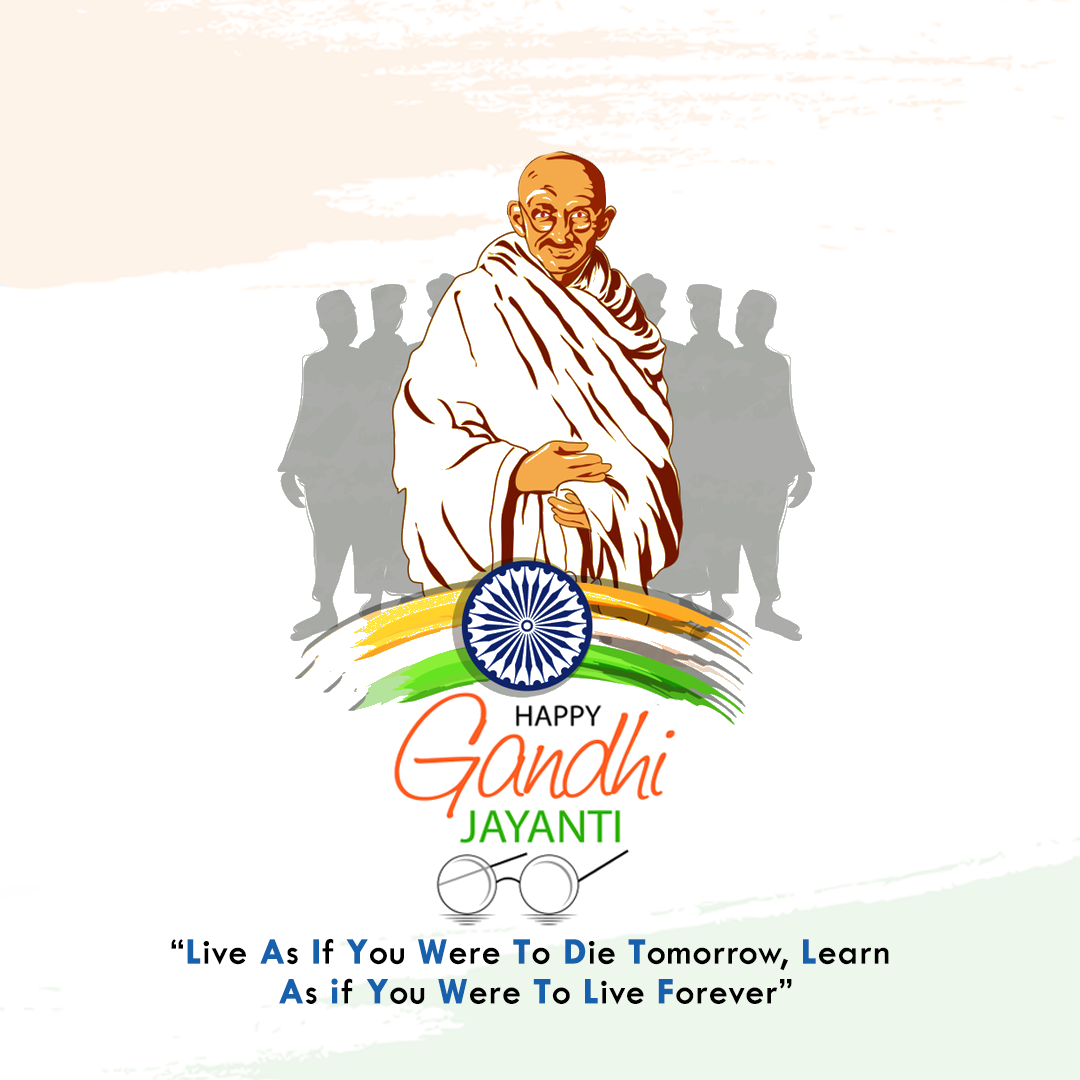
<style>
.page{position:relative;width:1080px;height:1080px;background:#ffffff}
.page>*{position:absolute;margin:0}
.t1{font:37.5px/39.8px "TwCenMT-Regular";color:#000000;font-weight:bold}
.t2{font:37.5px/39.8px "TwCenMT-Bold";color:#1760ac;font-weight:bold}
</style>
<div class="page">
<p class="t1" style="left:171px;top:939px;width:718px;height:66px;text-align:center">“<span class="t2">L</span>ive <span class="t2">A</span>s <span class="t2">I</span>f<span class="t2"> Y</span>ou <span class="t2">W</span>ere <span class="t2">T</span>o <span class="t2">D</span>ie <span class="t2">T</span>omorrow, <span class="t2">L</span>earn <br><span class="t2">A</span>s <span class="t2">i</span>f <span class="t2">Y</span>ou <span class="t2">W</span>ere <span class="t2">T</span>o<span class="t2"> L</span>ive<span class="t2"> F</span>orever”</p>
</div>
